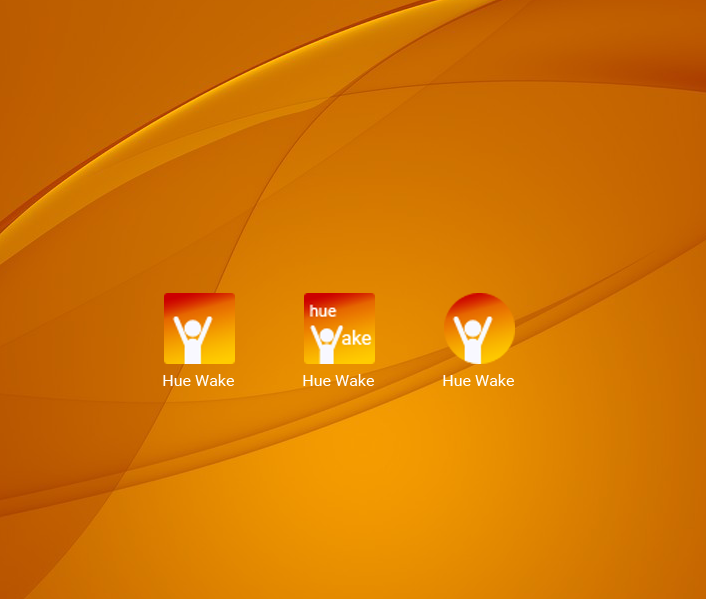
<style>
.page{position:relative;width:706px;height:599px}
.page>*{position:absolute;margin:0}
.t1{font:16px "Roboto-Regular";color:#ffffff}
</style>
<div class="page">
<p class="t1" style="left:163px;top:374px;width:71px;height:12px">Hue Wake</p>
<p class="t1" style="left:303px;top:374px;width:71px;height:12px">Hue Wake</p>
<p class="t1" style="left:443px;top:374px;width:71px;height:12px">Hue Wake</p>
</div>
